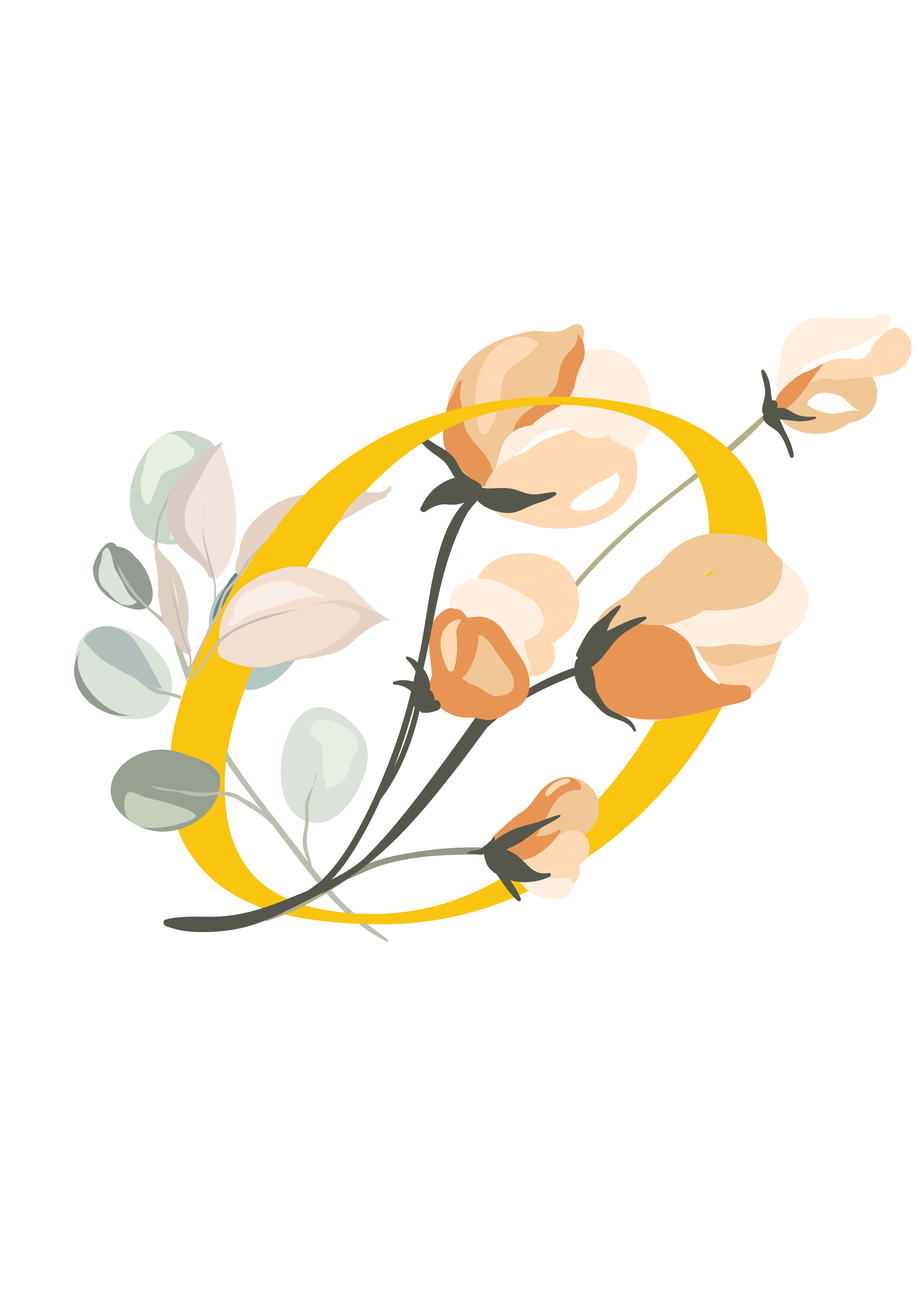
<style>
.page{position:relative;width:918px;height:1299px;background:#ffffff}
.page>*{position:absolute;margin:0}
.t1{font:462.8px "Zapfino";letter-spacing:0.03em;color:#f9c50f}
</style>
<div class="page">
<p class="t1" style="left:169px;top:397px;width:598px;height:527px">O</p>
</div>
